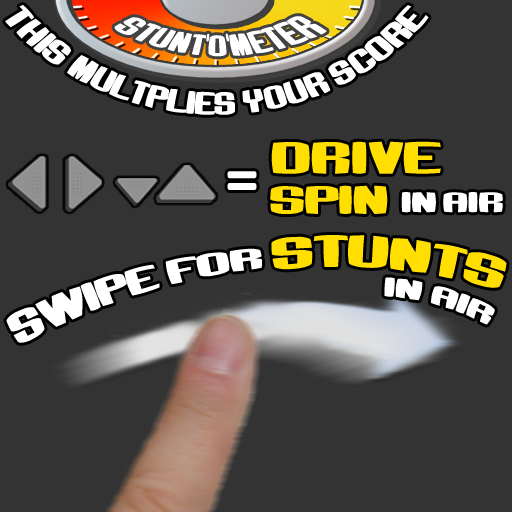
<style>
.page{position:relative;width:512px;height:512px;background:#333333}
.page>*{position:absolute;margin:0}
.t1{font:15.2px/27px "Bumbastika";letter-spacing:-0.035em;color:#ffffff}
.t2{font:30.3px "Bumbastika";letter-spacing:-0.035em;color:#ffde00}
.t3{font:60px "CooperBlackStd";letter-spacing:-0.035em;color:#ffffff}
.t4{font:19.1px "Bumbastika";letter-spacing:-0.035em;color:#ffffff}
.t5{font:19.1px "Bumbastika";letter-spacing:-0.035em;color:#aeaeae}
.t6{font:26.7px "Bumbastika";letter-spacing:-0.035em;color:#ffde00}
.t7{font:30px "Bumbastika";letter-spacing:-0.035em;color:#ffde00}
.t8{font:23.7px "Bumbastika";letter-spacing:-0.035em;color:#ffffff}
.t9{font:18px "Bumbastika";letter-spacing:-0.035em;color:#ffffff}
</style>
<div class="page">
<p class="t1" style="left:5px;top:5px;width:424px;height:110px;text-align:center">THIS MULTPLIES YOUR SCORE</p>
<p class="t2" style="left:271px;top:141px;width:170px;height:33px">Drive</p>
<p class="t3" style="left:227px;top:171px;width:30px;height:19px">=</p>
<p class="t4" style="left:270px;top:185px;width:233px;height:29px"><span class="t5"> </span><span class="t6">SPIN </span>in air</p>
<p class="t7" style="left:271px;top:235px;width:236px;height:53px;rotate:8deg">Stunts</p>
<p class="t8" style="left:6px;top:248px;width:256px;height:95px;rotate:-16deg">Swipe for</p>
<p class="t9" style="left:384px;top:277px;width:111px;height:48px;rotate:19deg">in air</p>
</div>
